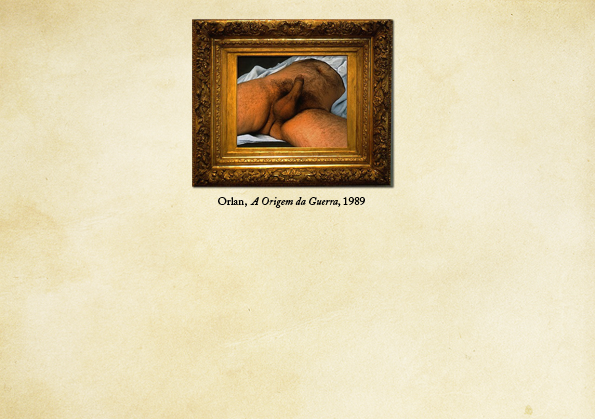
<style>
.page{position:relative;width:595px;height:419px}
.page>*{position:absolute;margin:0}
.t1{font:11px "ACaslonPro-Italic";color:#000000}
.t2{font:11px "ACaslonPro-Regular";color:#000000}
</style>
<div class="page">
<p class="t1" style="left:218px;top:197px;width:147px;height:11px"><span class="t2">Orlan,  </span>A Origem da Guerra<span class="t2">, 1989</span></p>
</div>
